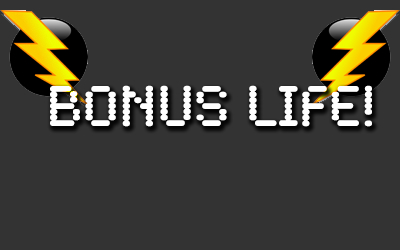
<style>
.page{position:relative;width:400px;height:250px;background:#333333}
.page>*{position:absolute;margin:0}
.t1{font:60px "SynchroLET";color:#ffffff}
</style>
<div class="page">
<p class="t1" style="left:50px;top:85px;width:322px;height:42px">BONUS LIFE!</p>
</div>
